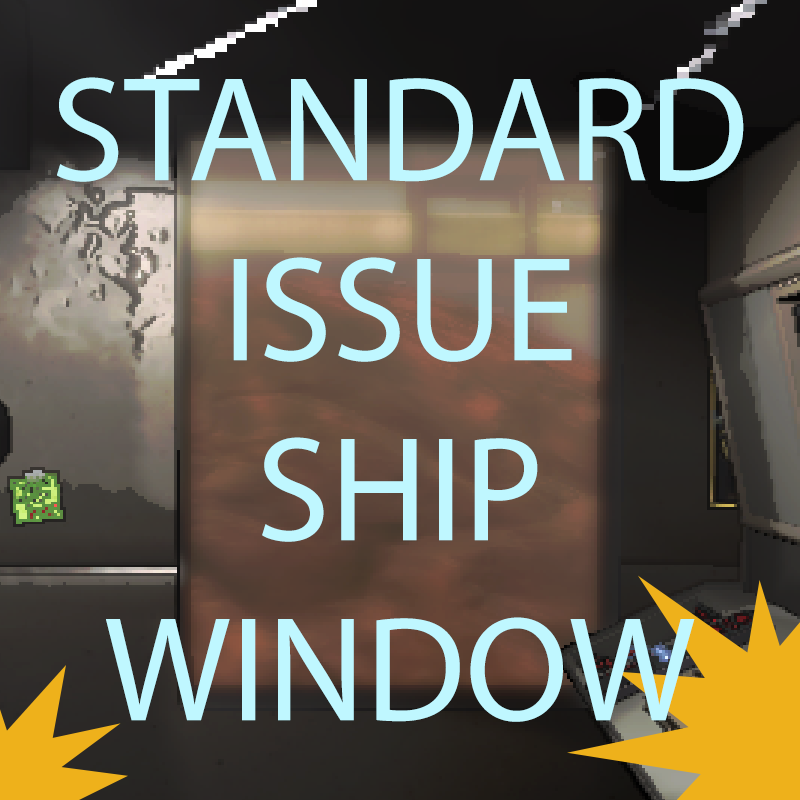
<style>
.page{position:relative;width:800px;height:800px}
.page>*{position:absolute;margin:0}
.t1{font:150px "MyriadPro-Regular";color:#bff7ff}
</style>
<div class="page">
<p class="t1" style="left:57px;top:77px;width:687px;height:645px;text-align:center">STANDARD<br>ISSUE<br>SHIP<br>WINDOW</p>
</div>
